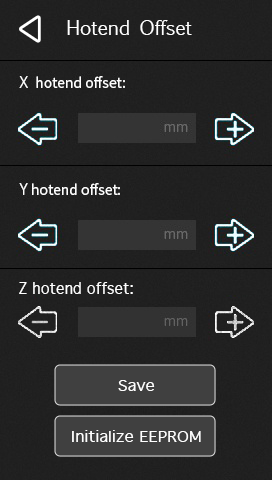
<style>
.page{position:relative;width:272px;height:480px;background:#202020}
.page>*{position:absolute;margin:0}
.t1{font:19px "EuphemiaUCAS";letter-spacing:-0.015em;color:#ffffff}
.t2{font:14.7px "Geneva";color:#ffffff}
.t3{font:15.3px "Geneva";color:#ffffff;scale:1.06 1}
</style>
<div class="page">
<p class="t1" style="left:67px;top:20px;width:125px;height:15px">Hotend Offset</p>
<p class="t2" style="left:19px;top:282px;width:114px;height:12px">Z hotend offset:</p>
<p class="t3" style="left:118px;top:380px;width:37px;height:11px">Save</p>
<p class="t3" style="left:72px;top:430px;width:129px;height:12px">Initialize EEPROM</p>
</div>
